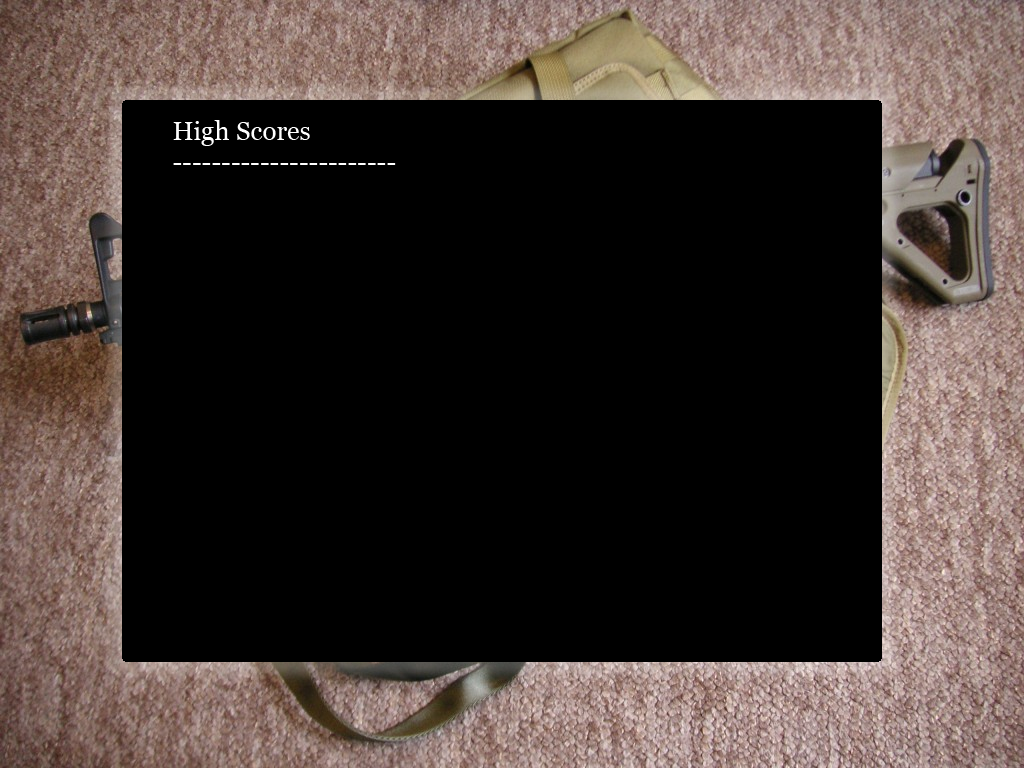
<style>
.page{position:relative;width:1024px;height:768px;background:#000000}
.page>*{position:absolute;margin:0}
.t1{font:26px "Georgia";color:#ffffff}
</style>
<div class="page">
<p class="t1" style="left:173px;top:120px;width:223px;height:45px">High Scores<br>-----------------------</p>
</div>
